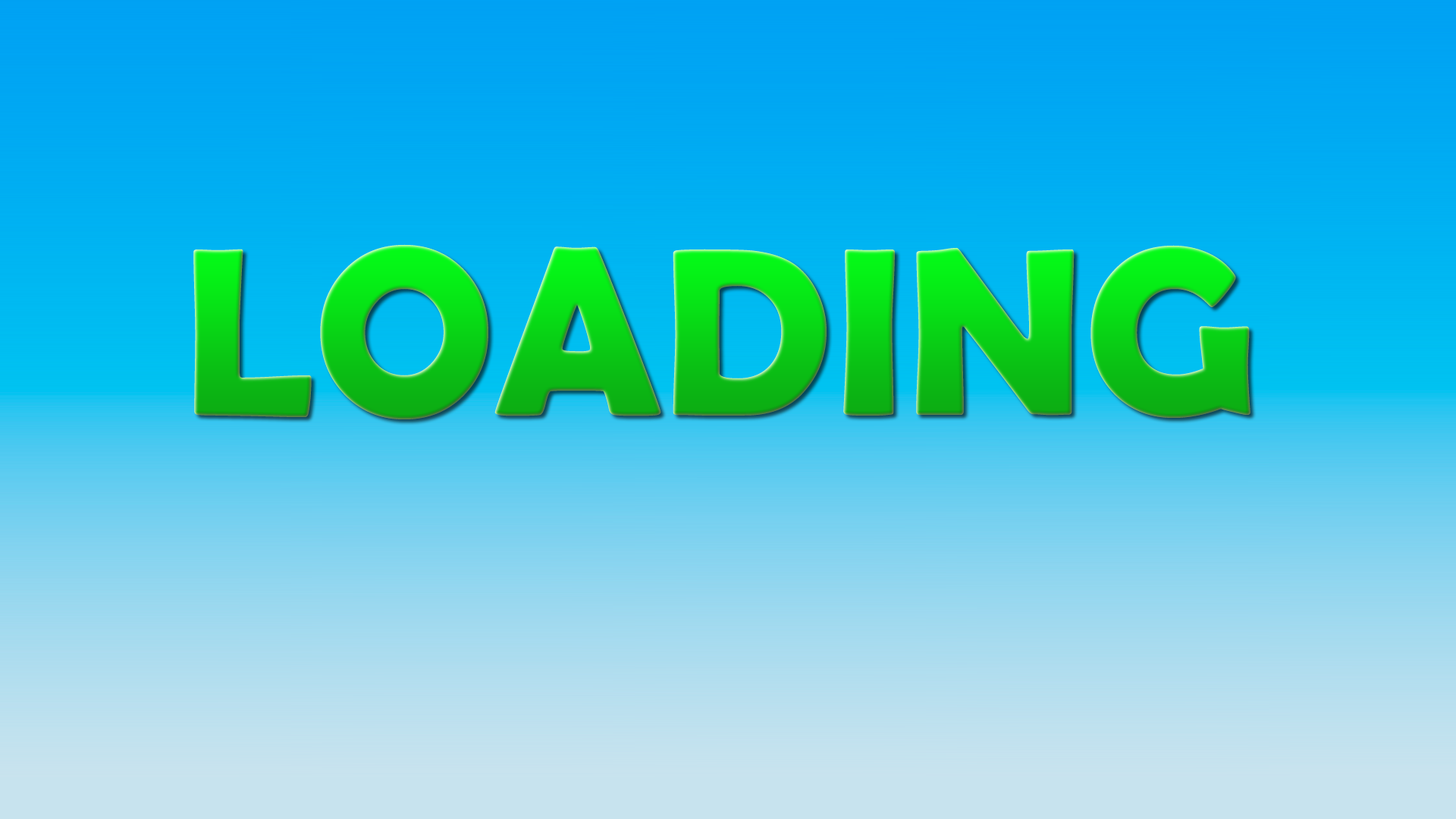
<style>
.page{position:relative;width:1456px;height:819px}
.page>*{position:absolute;margin:0}
.t1{font:240.8px "BerlinSansFBDemi-Bold"}
</style>
<div class="page">
<p class="t1" style="left:193px;top:244px;width:1057px;height:175px">LOADING</p>
</div>
